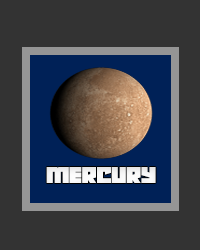
<style>
.page{position:relative;width:200px;height:250px;background:#333333}
.page>*{position:absolute;margin:0}
.t1{font:23.4px "RobotRadicals";color:#ffffff}
</style>
<div class="page">
<p class="t1" style="left:46px;top:167px;width:110px;height:16px">mercury</p>
</div>
